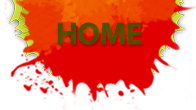
<style>
.page{position:relative;width:196px;height:110px;background:#ffffff}
.page>*{position:absolute;margin:0}
.t1{font:31.9px "MyriadPro-Bold";letter-spacing:-0.03em;color:#4c4f00}
</style>
<div class="page">
<p class="t1" style="left:57px;top:22px;width:85px;height:23px">HOME</p>
</div>
